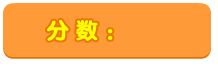
<style>
.page{position:relative;width:218px;height:66px;background:#fe9a38}
.page>*{position:absolute;margin:0}
.t1{font:22px "JCuYuan";letter-spacing:0.3em;color:#fffe00;font-weight:bold}
</style>
<div class="page">
<p class="t1" style="left:47px;top:20px;width:66px;height:21px">分数：</p>
</div>
